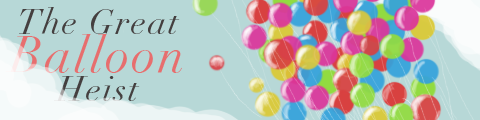
<style>
.page{position:relative;width:480px;height:120px;background:#b7d8d7}
.page>*{position:absolute;margin:0}
.t1{font:35.2px/21px "Didot-Italic";letter-spacing:0.04em;color:#443f3f}
.t2{font:50px/37.6px "Didot-Italic";letter-spacing:0.04em;color:#e76e6e}
.t3{font:35.2px/29.3px "Didot-Italic";letter-spacing:0.04em;color:#443f3f}
</style>
<div class="page">
<p class="t1" style="left:5px;top:7px;width:177px;height:94px;text-align:center">The Great<br><span class="t2">Balloon<br></span><span class="t3">Heist</span></p>
</div>
